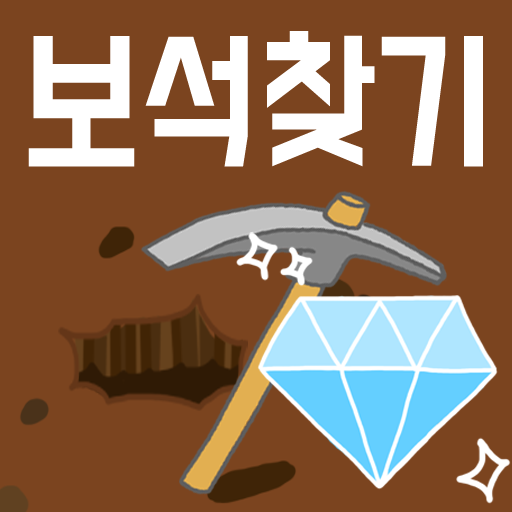
<style>
.page{position:relative;width:512px;height:512px;background:#7b441f}
.page>*{position:absolute;margin:0}
.t1{font:137.7px "BMDoHyeon";color:#ffffff;scale:0.89 1}
</style>
<div class="page">
<p class="t1" style="left:28px;top:31px;width:455px;height:136px">보석찾기</p>
</div>
